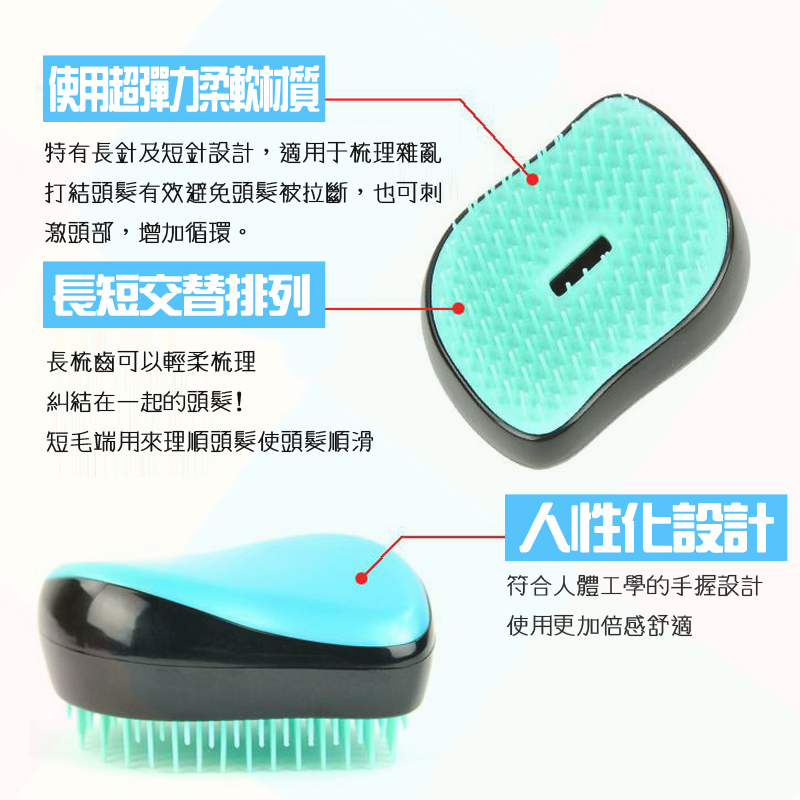
<style>
.page{position:relative;width:800px;height:800px}
.page>*{position:absolute;margin:0}
.t1{font:48.1px "HanWangZonYi";letter-spacing:-0.05em;color:#ffffff;font-weight:bold;scale:0.64 1}
.t2{font:24px/40px "winman-tun33014";letter-spacing:-0.05em;color:#131313;font-weight:bold}
.t3{font:44px "HanWangZonYi";letter-spacing:-0.05em;color:#ffffff;font-weight:bold}
.t4{font:52.3px "HanWangZonYi";letter-spacing:-0.05em;color:#ffffff;font-weight:bold}
.t5{font:24px/40px "winman-tun33014";letter-spacing:-0.05em;color:#2d2d2d;font-weight:bold}
</style>
<div class="page">
<p class="t1" style="left:49px;top:65px;width:271px;height:47px">使用超彈力柔軟材質</p>
<p class="t2" style="left:44px;top:141px;width:398px;height:103px">特有長針及短針設計，適用于梳理雜亂<br>打結頭髮有效避免頭髮被拉斷，也可刺<br>激頭部，增加循環。</p>
<p class="t3" style="left:53px;top:274px;width:257px;height:42px">長短交替排列</p>
<p class="t2" style="left:47px;top:350px;width:327px;height:103px">長梳齒可以輕柔梳理<br>糾結在一起的頭髮!<br>短毛端用來理順頭髮使頭髮順滑</p>
<p class="t4" style="left:519px;top:502px;width:255px;height:51px">人性化設計</p>
<p class="t5" style="left:506px;top:574px;width:257px;height:63px">符合人體工學的手握設計<br>使用更加倍感舒適</p>
</div>
